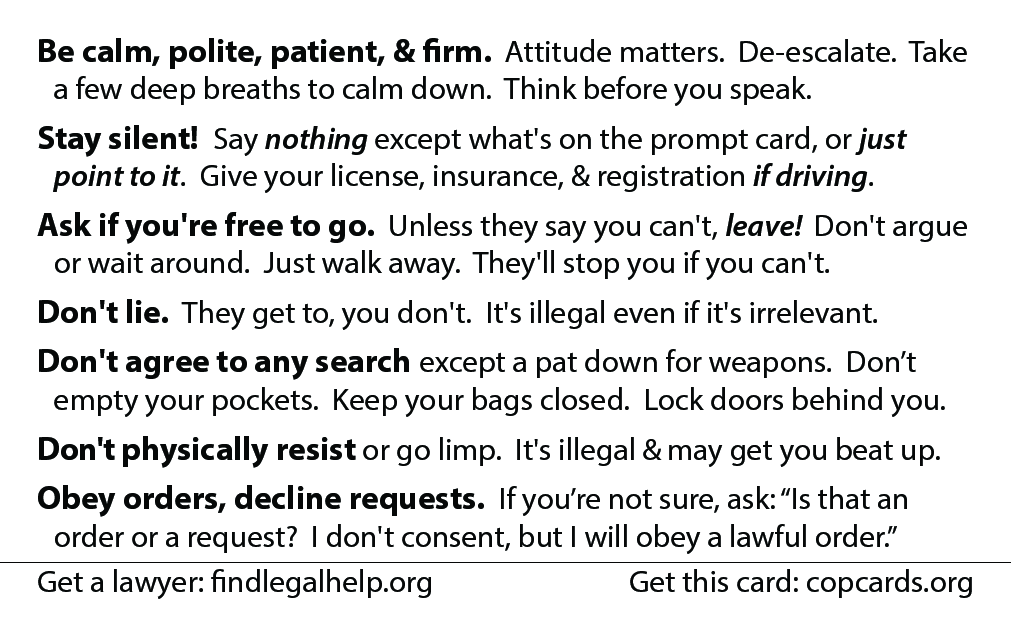
<style>
.page{position:relative;width:1011px;height:638px;background:#ffffff}
.page>*{position:absolute;margin:0}
.t1{font:31.2px "MyriadPro-Regular";color:#060808}
.t2{font:33.3px "MyriadPro-Bold";color:#060808}
.t3{font:31.2px "MyriadPro-SemiboldIt";color:#060808}
.t4{font:33.3px "MyriadPro-Bold";letter-spacing:-0.02em;color:#060808}
</style>
<div class="page">
<p class="t1" style="left:37px;top:38px;width:935px;height:561px"><span class="t2">Be calm, polite, patient, &amp; firm.  </span>Attitude matters.  De-escalate.  Take a few deep breaths to calm down.  Think before you speak.<br><span class="t2">Stay silent! </span> Say <span class="t3">nothing </span>except what's on the prompt card, or <span class="t3">just point to it</span>.  Give your license, insurance, &amp; registration<span class="t3"> if driving</span>.<br><span class="t2">Ask if you're free to go. </span> Unless they say you can't, <span class="t3">leave!  </span>Don't argue or wait around.  Just walk away.  They'll stop you if you can't.<br><span class="t2">Don't lie.  </span>They get to, you don't.  It's illegal even if it's irrelevant.<br><span class="t2">Don't agree to any search </span>except a pat down for weapons.  Don’t empty your pockets.  Keep your bags closed.  Lock doors behind you.<br><span class="t4">Don't </span><span class="t2">physically resist </span>or go limp.  It's illegal &amp; may get you beat up.<br><span class="t2">Obey orders, decline requests. </span> If you’re not sure, ask: “Is that an order or a request?  I don't consent, but I will obey a lawful order.”<br>Get a lawyer: findlegalhelp.org Get this card: copcards.org<br><br>Get a lawyer: findlegalhelp.org      Get this card: copcards.org</p>
</div>
